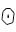
<style>
.page{position:relative;width:16px;height:32px;background:#ffffff}
.page>*{position:absolute;margin:0}
.t1{font:20px "SuperMarioGalaxy";color:#ffffff}
</style>
<div class="page">
<p class="t1" style="left:2px;top:9px;width:12px;height:15px">0</p>
</div>
